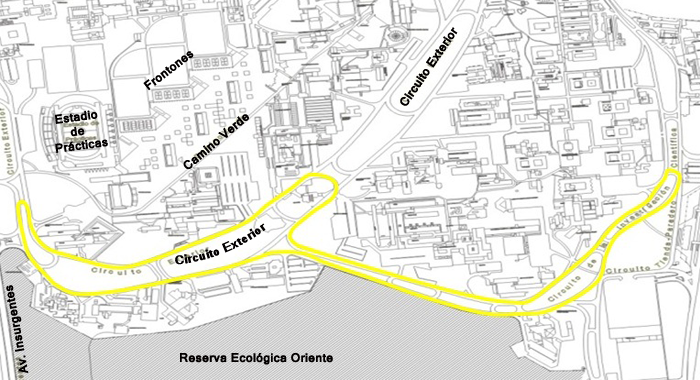
<style>
.page{position:relative;width:700px;height:380px;background:#ffffff}
.page>*{position:absolute;margin:0}
.t1{font:12px "Kartika-Bold";color:#030000}
</style>
<div class="page">
<p class="t1" style="left:400px;top:27px;width:58px;height:79px;rotate:-56deg">Circuito Exterior</p>
<p class="t1" style="left:143px;top:51px;width:51px;height:40px;rotate:-38deg">Frontones</p>
<p class="t1" style="left:54px;top:110px;width:54px;height:43px;rotate:-8deg">Estadio<br>     de<br>Prácticas</p>
<p class="t1" style="left:183px;top:114px;width:66px;height:56px;rotate:-40deg">Camino Verde</p>
<p class="t1" style="left:175px;top:223px;width:91px;height:42px;rotate:-21deg">Circuito Exterior</p>
<p class="t1" style="left:6px;top:285px;width:23px;height:88px;rotate:-100deg">Av. Insurgentes</p>
<p class="t1" style="left:180px;top:352px;width:153px;height:13px">Reserva Ecológica Oriente</p>
</div>
